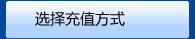
<style>
.page{position:relative;width:195px;height:39px;background:#b1d3ff}
.page>*{position:absolute;margin:0}
.t1{font:15px "MicrosoftYaHei";color:#000000}
</style>
<div class="page">
<p class="t1" style="left:35px;top:11px;width:90px;height:16px">选择充值方式</p>
</div>
